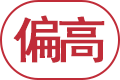
<style>
.page{position:relative;width:120px;height:80px;background:#ffffff}
.page>*{position:absolute;margin:0}
.t1{font:50px "SimHei";color:#c02c38;text-transform:uppercase;font-weight:bold}
</style>
<div class="page">
<p class="t1" style="left:13px;top:15px;width:48px;height:48px">偏</p>
<p class="t1" style="left:59px;top:16px;width:46px;height:47px">高</p>
</div>
